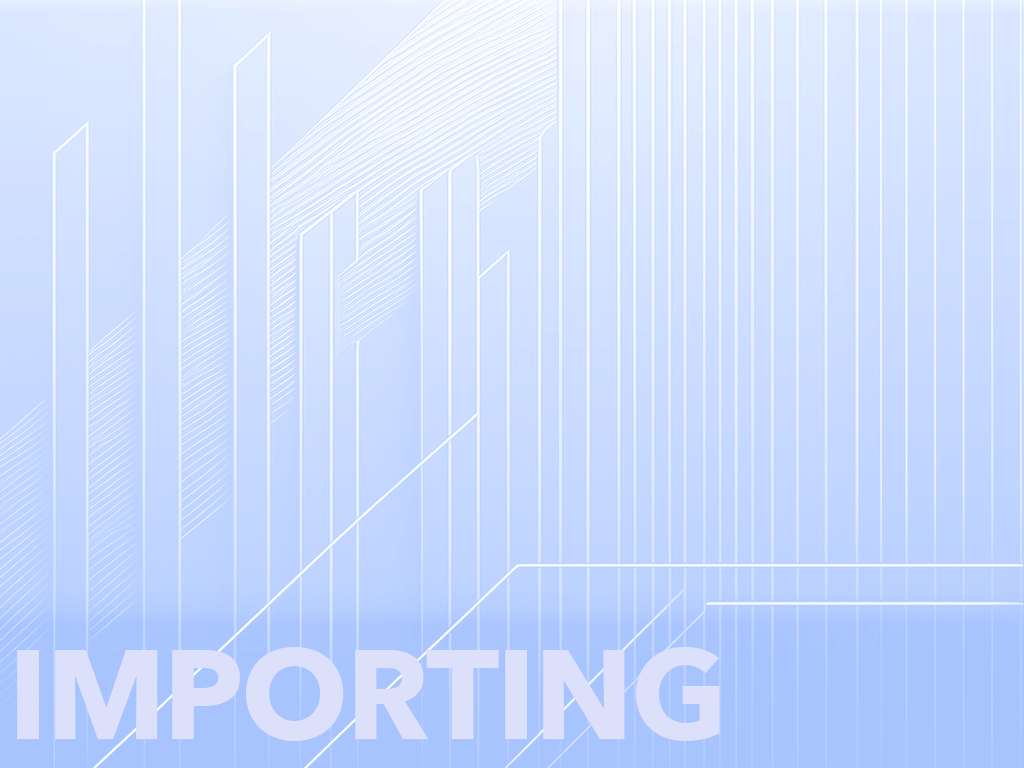
<style>
.page{position:relative;width:1024px;height:768px}
.page>*{position:absolute;margin:0}
.t1{font:126px "AvenirNext-Bold";letter-spacing:-0.02em;color:#d8dbf9}
</style>
<div class="page">
<p class="t1" style="left:17px;top:647px;width:703px;height:94px">IMPORTING</p>
</div>
